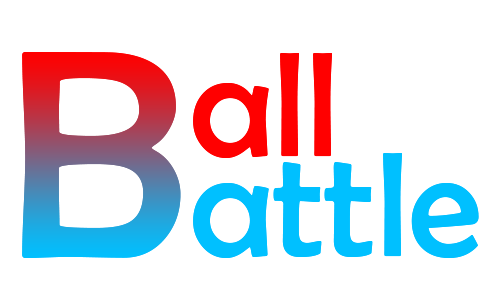
<style>
.page{position:relative;width:500px;height:300px;background:#ffffff}
.page>*{position:absolute;margin:0}
.t1{font:300px "BerlinSansFB-Reg"}
.t2{font:150px/100px "BerlinSansFB-Reg";color:#00c0ff}
.t3{font:150px/100px "BerlinSansFB-Reg";color:#ff0000}
</style>
<div class="page">
<p class="t1" style="left:22px;top:52px;width:159px;height:206px">B</p>
<p class="t2" style="left:193px;top:53px;width:286px;height:205px"><span class="t3">all<br></span>attle</p>
</div>
